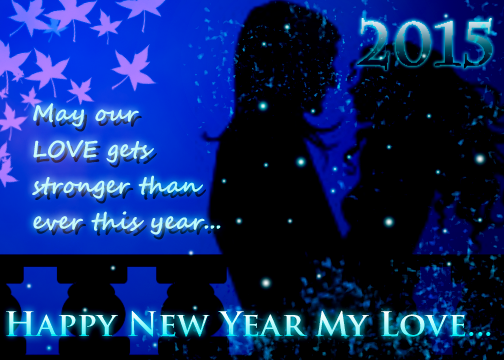
<style>
.page{position:relative;width:504px;height:360px;background:#000000}
.page>*{position:absolute;margin:0}
.t1{font:23px/18px "SegoeScript-Bold";letter-spacing:0.01em;color:#d2fafa}
.t2{font:23px/18px "SegoePrint-Bold";letter-spacing:0.01em;color:#d2fafa}
.t3{font:33px "TrajanPro-Bold";letter-spacing:0.01em}
</style>
<div class="page">
<p class="t1" style="left:32px;top:103px;width:189px;height:132px">May our <br><br><span class="t2">LOVE</span> gets<br><br>stronger than <br><br>ever this year...</p>
<p class="t3" style="left:6px;top:310px;width:485px;height:27px">Happy New Year My Love...</p>
</div>
